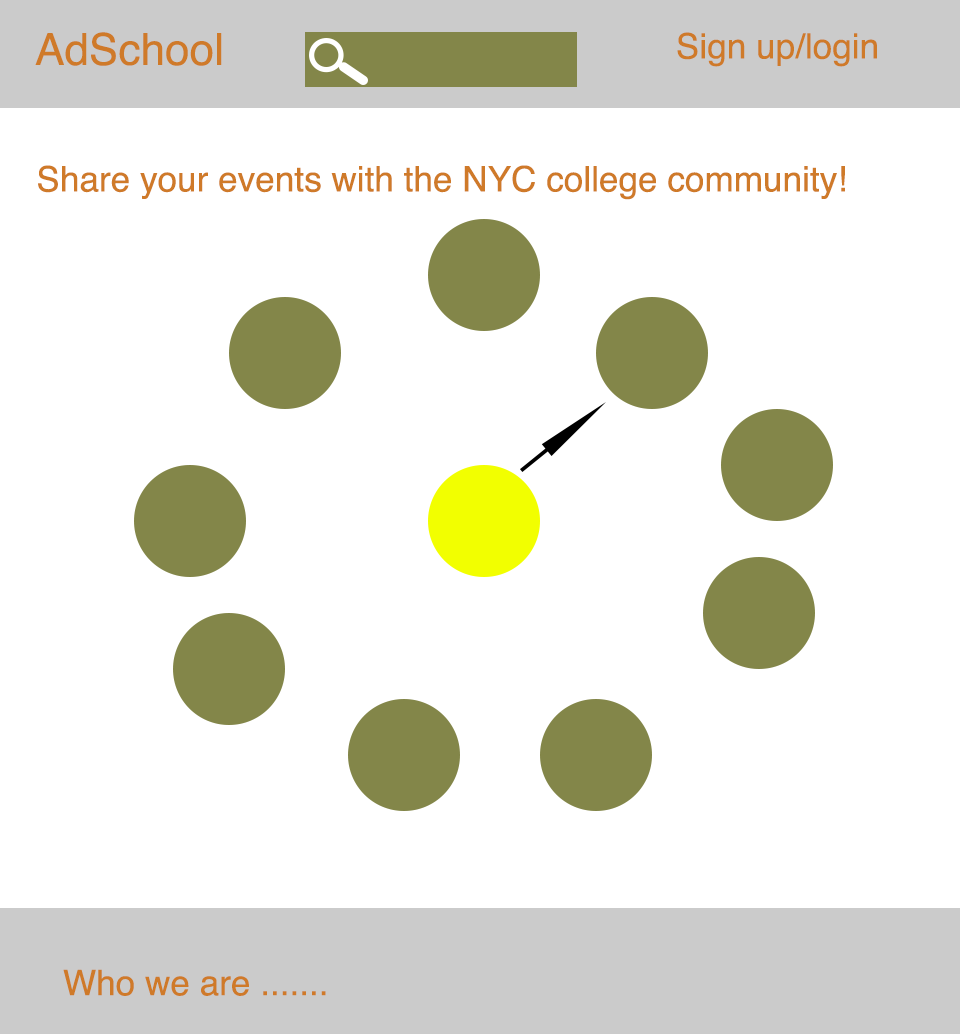
<style>
.page{position:relative;width:960px;height:1034px;background:#ffffff}
.page>*{position:absolute;margin:0}
.t1{font:44px "Helvetica";color:#cf7a29}
.t2{font:35.1px "Helvetica";color:#cf7a29}
</style>
<div class="page">
<p class="t1" style="left:35px;top:32px;width:187px;height:34px">AdSchool</p>
<p class="t2" style="left:677px;top:32px;width:200px;height:35px">Sign up/login</p>
<p class="t2" style="left:38px;top:165px;width:807px;height:35px">Share your events with the NYC college community!</p>
<p class="t2" style="left:63px;top:969px;width:263px;height:27px">Who we are .......</p>
</div>
